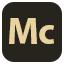
<style>
.page{position:relative;width:64px;height:64px;background:#27241d}
.page>*{position:absolute;margin:0}
.t1{font:37.8px "MyriadPro-Bold";letter-spacing:-0.02em;color:#e8d39f}
</style>
<div class="page">
<p class="t1" style="left:9px;top:18px;width:45px;height:26px">Mc</p>
</div>
